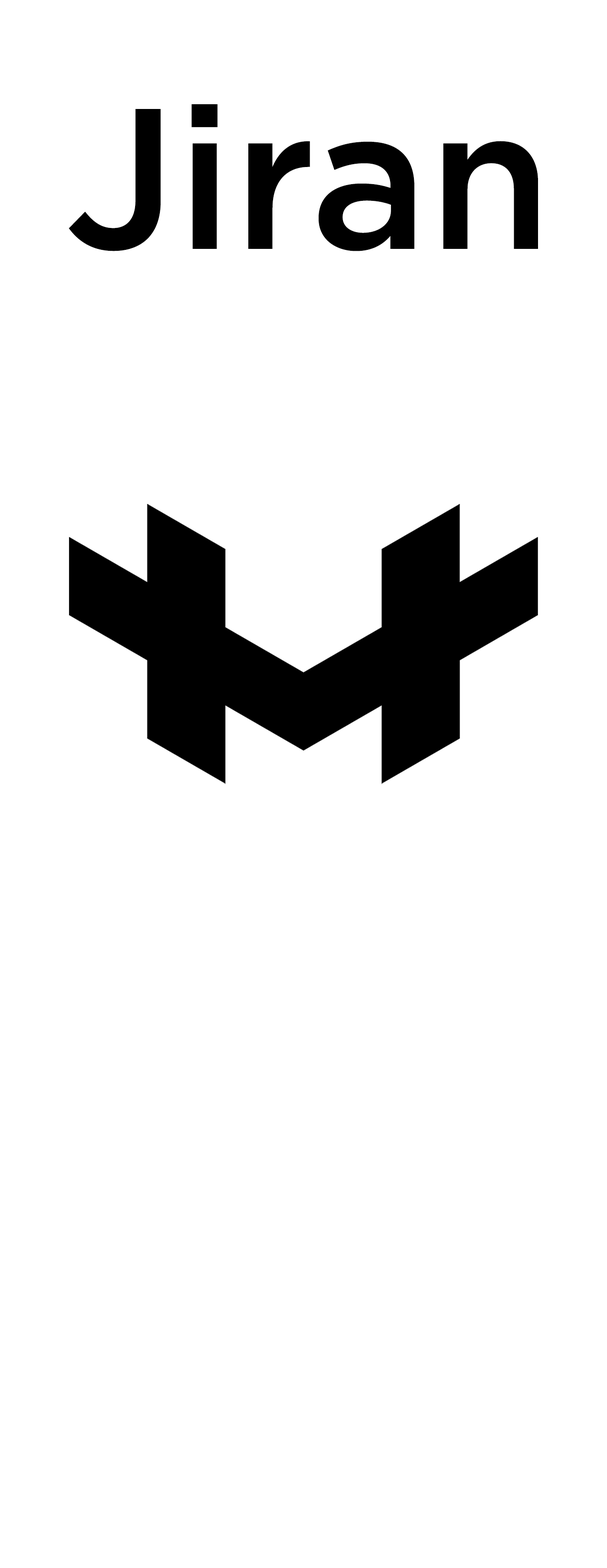
<style>
.page{position:relative;width:607px;height:1568px;background:#ffffff}
.page>*{position:absolute;margin:0}
.t1{font:199.9px "Gotham-Medium";color:#000000}
</style>
<div class="page">
<p class="t1" style="left:69px;top:104px;width:469px;height:147px">Jiran</p>
</div>
